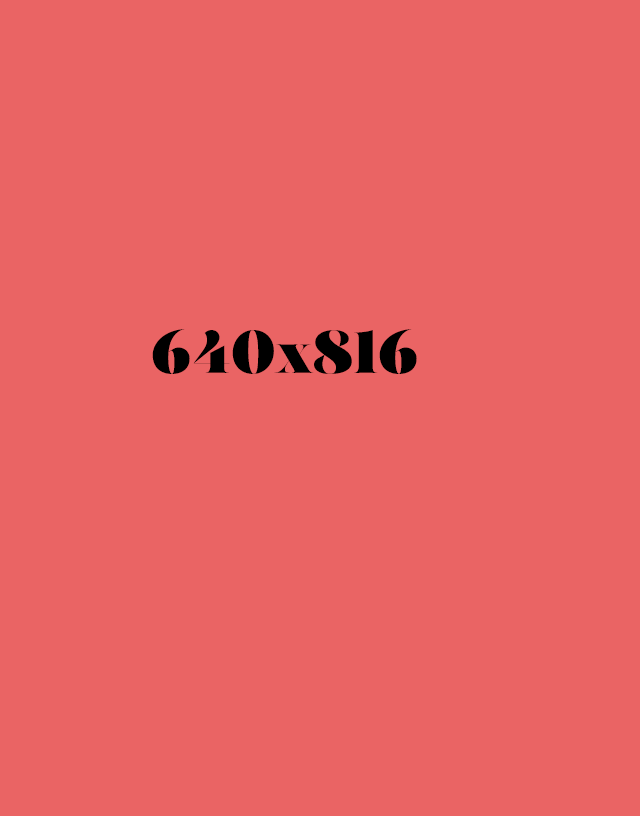
<style>
.page{position:relative;width:640px;height:816px;background:#ea6464}
.page>*{position:absolute;margin:0}
.t1{font:60px "Salome-Fine";color:#000000}
</style>
<div class="page">
<p class="t1" style="left:152px;top:329px;width:265px;height:45px">640x816</p>
</div>
